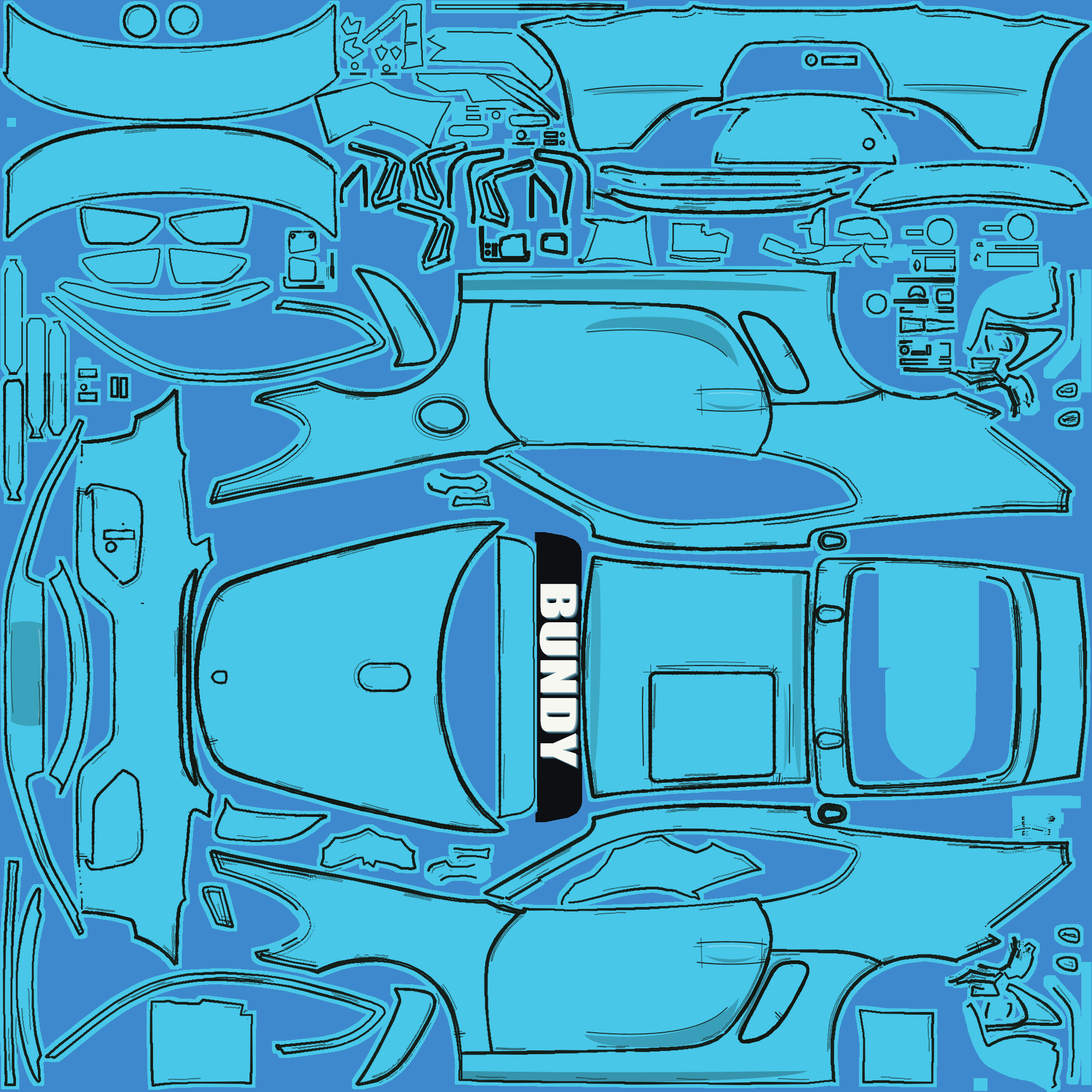
<style>
.page{position:relative;width:1092px;height:1092px;background:#48c7e8}
.page>*{position:absolute;margin:0}
.t1{font:44.8px "Impact";color:#f6f7f1;scale:1.55 1}
</style>
<div class="page">
<p class="t1" style="left:540px;top:584px;width:36px;height:183px;rotate:90deg">BUNDY</p>
<p class="t1" style="left:541px;top:585px;width:36px;height:183px;rotate:90deg">BUNDY</p>
<p class="t1" style="left:542px;top:586px;width:37px;height:183px;rotate:90deg">BUNDY</p>
</div>
